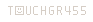
<style>
.page{position:relative;width:93px;height:22px;background:#ffffff}
.page>*{position:absolute;margin:0}
.t1{font:10px "NDS12";letter-spacing:0.18em;color:#d6cec6}
</style>
<div class="page">
<p class="t1" style="left:8px;top:6px;width:78px;height:9px">T  UCHGR455</p>
</div>
